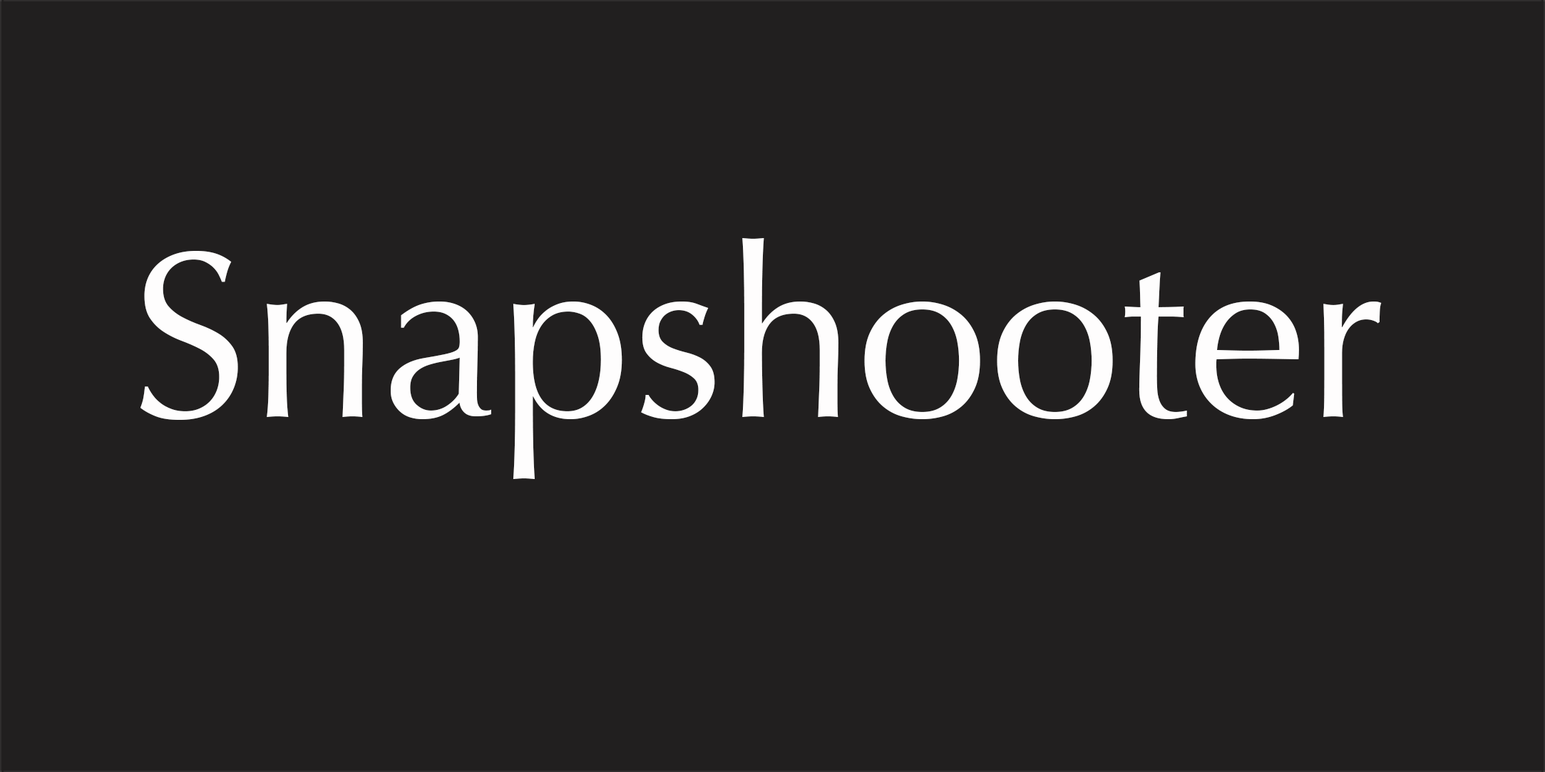
<style>
.page{position:relative;width:1545px;height:772px;background:#211f1f}
.page>*{position:absolute;margin:0}
.t1{font:237.5px "Optima-Regular";color:#fefdfd}
</style>
<div class="page">
<p class="t1" style="left:140px;top:238px;width:1241px;height:241px">Snapshooter</p>
</div>
